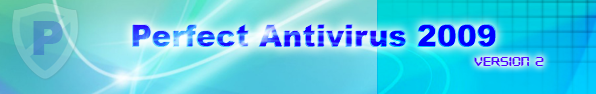
<style>
.page{position:relative;width:596px;height:94px}
.page>*{position:absolute;margin:0}
.t1{font:30px "Arial-Black"}
.t2{font:12px "DigifaceWide";color:#4e00ff}
</style>
<div class="page">
<p class="t1" style="left:132px;top:25px;width:364px;height:22px">Perfect Antivirus 2009</p>
<p class="t1" style="left:133px;top:24px;width:364px;height:22px">Perfect Antivirus 2009</p>
<p class="t1" style="left:133px;top:24px;width:364px;height:22px">Perfect Antivirus 2009</p>
<p class="t2" style="left:474px;top:57px;width:70px;height:10px">Version 2</p>
</div>
